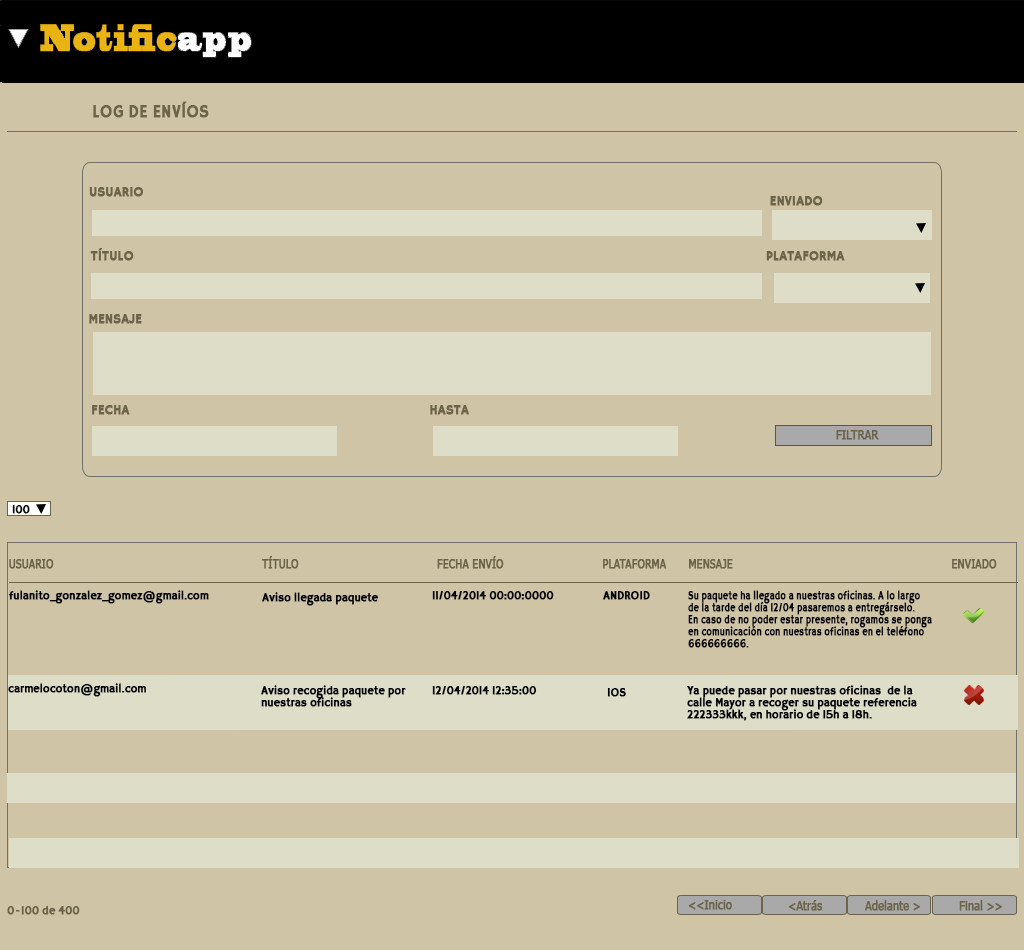
<style>
.page{position:relative;width:1024px;height:950px;background:#cfc5a6}
.page>*{position:absolute;margin:0}
.t1{font:18px "HammersmithOne";color:#6c644a;font-weight:bold;scale:0.9 1}
.t2{font:14px "HammersmithOne";color:#6c644a;font-weight:bold;scale:0.9 1}
.t3{font:12px "Tahoma";color:#6c644a;font-weight:bold;scale:0.9 1}
.t4{font:12px "HammersmithOne";color:#000000;font-weight:bold;scale:0.9 1}
.t5{font:12px "Tahoma";color:#6c644a;font-weight:bold;scale:0.86 1}
.t6{font:12px/12px "HammersmithOne";color:#000000;font-weight:bold;scale:0.76 1}
.t7{font:12px/12px "HammersmithOne";color:#000000;font-weight:bold;scale:0.9 1}
.t8{font:12px "HammersmithOne";color:#6c644a;font-weight:bold;scale:0.9 1}
</style>
<div class="page">
<p class="t1" style="left:93px;top:101px;width:116px;height:17px">LOG DE ENVÍOS</p>
<p class="t2" style="left:89px;top:187px;width:54px;height:10px">USUARIO</p>
<p class="t2" style="left:770px;top:196px;width:53px;height:10px">ENVIADO</p>
<p class="t2" style="left:90px;top:248px;width:44px;height:13px">TÍTULO</p>
<p class="t2" style="left:766px;top:251px;width:79px;height:10px">PLATAFORMA</p>
<p class="t2" style="left:89px;top:314px;width:53px;height:10px">MENSAJE</p>
<p class="t2" style="left:92px;top:405px;width:38px;height:10px">FECHA</p>
<p class="t2" style="left:430px;top:405px;width:39px;height:10px">HASTA</p>
<p class="t3" style="left:836px;top:430px;width:43px;height:10px">FILTRAR</p>
<p class="t4" style="left:12px;top:505px;width:18px;height:9px">100</p>
<p class="t5" style="left:261px;top:556px;width:38px;height:13px">TÍTULO</p>
<p class="t5" style="left:437px;top:556px;width:67px;height:13px">FECHA ENVÍO</p>
<p class="t5" style="left:9px;top:559px;width:45px;height:10px">USUARIO</p>
<p class="t5" style="left:603px;top:559px;width:64px;height:10px">PLATAFORMA</p>
<p class="t5" style="left:689px;top:559px;width:44px;height:10px">MENSAJE</p>
<p class="t5" style="left:952px;top:559px;width:45px;height:10px">ENVIADO</p>
<p class="t4" style="left:9px;top:590px;width:200px;height:14px">fulanito_gonzalez_gomez@gmail.com</p>
<p class="t4" style="left:262px;top:592px;width:117px;height:14px">Aviso llegada paquete</p>
<p class="t4" style="left:432px;top:591px;width:122px;height:9px">11/04/2014 00:00:0000</p>
<p class="t4" style="left:603px;top:591px;width:47px;height:9px">ANDROID</p>
<p class="t6" style="left:688px;top:590px;width:244px;height:58px">Su paquete ha llegado a nuestras oficinas. A lo largo<br>de la tarde del día 12/04 pasaremos a entregárselo. <br>En caso de no poder estar presente, rogamos se ponga<br>en comunicación con nuestras oficinas en el teléfono<br>666666666.</p>
<p class="t4" style="left:8px;top:683px;width:138px;height:14px">carmelocoton@gmail.com</p>
<p class="t7" style="left:261px;top:685px;width:145px;height:22px">Aviso recogida paquete por<br>nuestras oficinas</p>
<p class="t4" style="left:432px;top:686px;width:105px;height:9px">12/04/2014 12:35:00</p>
<p class="t4" style="left:607px;top:688px;width:19px;height:9px">IOS</p>
<p class="t7" style="left:687px;top:685px;width:230px;height:36px">Ya puede pasar por nuestras oficinas  de la <br>calle Mayor a recoger su paquete referencia<br>222333kkk, en horario de 15h a 18h.</p>
<p class="t3" style="left:688px;top:900px;width:44px;height:10px">&lt;&lt;Inicio</p>
<p class="t3" style="left:788px;top:900px;width:35px;height:11px">&lt;Atrás</p>
<p class="t3" style="left:865px;top:900px;width:55px;height:11px">Adelante &gt;</p>
<p class="t3" style="left:959px;top:900px;width:43px;height:11px">Final &gt;&gt;</p>
<p class="t8" style="left:7px;top:906px;width:73px;height:9px">0-100 de 400</p>
</div>
